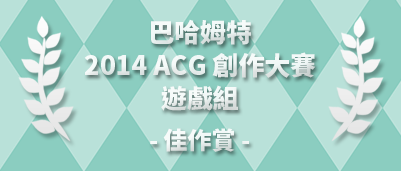
<style>
.page{position:relative;width:401px;height:171px;background:#8bcdc0}
.page>*{position:absolute;margin:0}
.t1{font:25.8px/33px "NotoSansCJKtc-Black";color:#ffffff}
.t2{font:24px "NotoSansCJKtc-Black";color:#ffffff}
</style>
<div class="page">
<p class="t1" style="left:84px;top:19px;width:232px;height:92px;text-align:center">巴哈姆特<br>2014 ACG 創作大賽<br>遊戲組</p>
<p class="t2" style="left:150px;top:128px;width:99px;height:24px">- 佳作賞 -</p>
</div>
